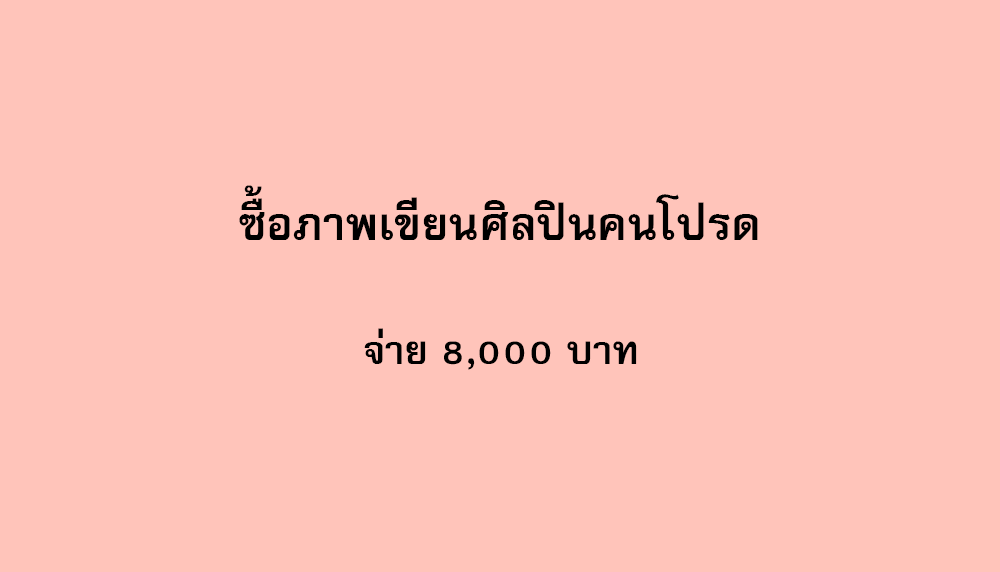
<style>
.page{position:relative;width:1000px;height:572px;background:#ffc4ba}
.page>*{position:absolute;margin:0}
.t1{font:64px "FreesiaUPCBold";color:#000000}
.t2{font:56px "FreesiaUPCBold";color:#000000}
</style>
<div class="page">
<p class="t1" style="left:239px;top:185px;width:519px;height:55px">ซื้อภาพเขียนศิลปินคนโปรด</p>
<p class="t2" style="left:364px;top:328px;width:273px;height:42px">จ่าย 8,000 บาท</p>
</div>
